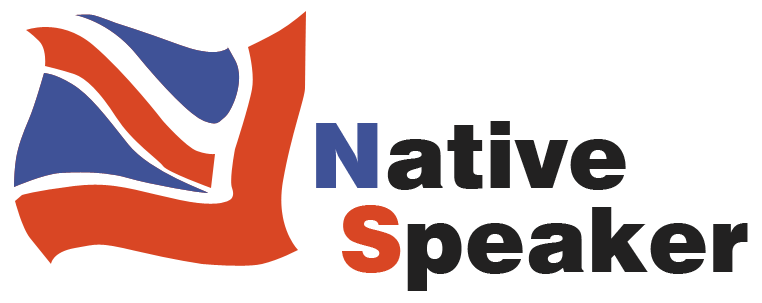
<style>
.page{position:relative;width:762px;height:303px;background:#ffffff}
.page>*{position:absolute;margin:0}
.t1{font:90.4px "Swiss721BT-Black";color:#222121}
.t2{font:90.4px "Swiss721BT-Black";color:#3f5297}
.t3{font:90.4px "Swiss721BT-Black";color:#d94624}
</style>
<div class="page">
<p class="t1" style="left:316px;top:121px;width:310px;height:69px"><span class="t2">N</span>ative</p>
<p class="t1" style="left:342px;top:205px;width:406px;height:86px"><span class="t3">S</span>peaker</p>
</div>
